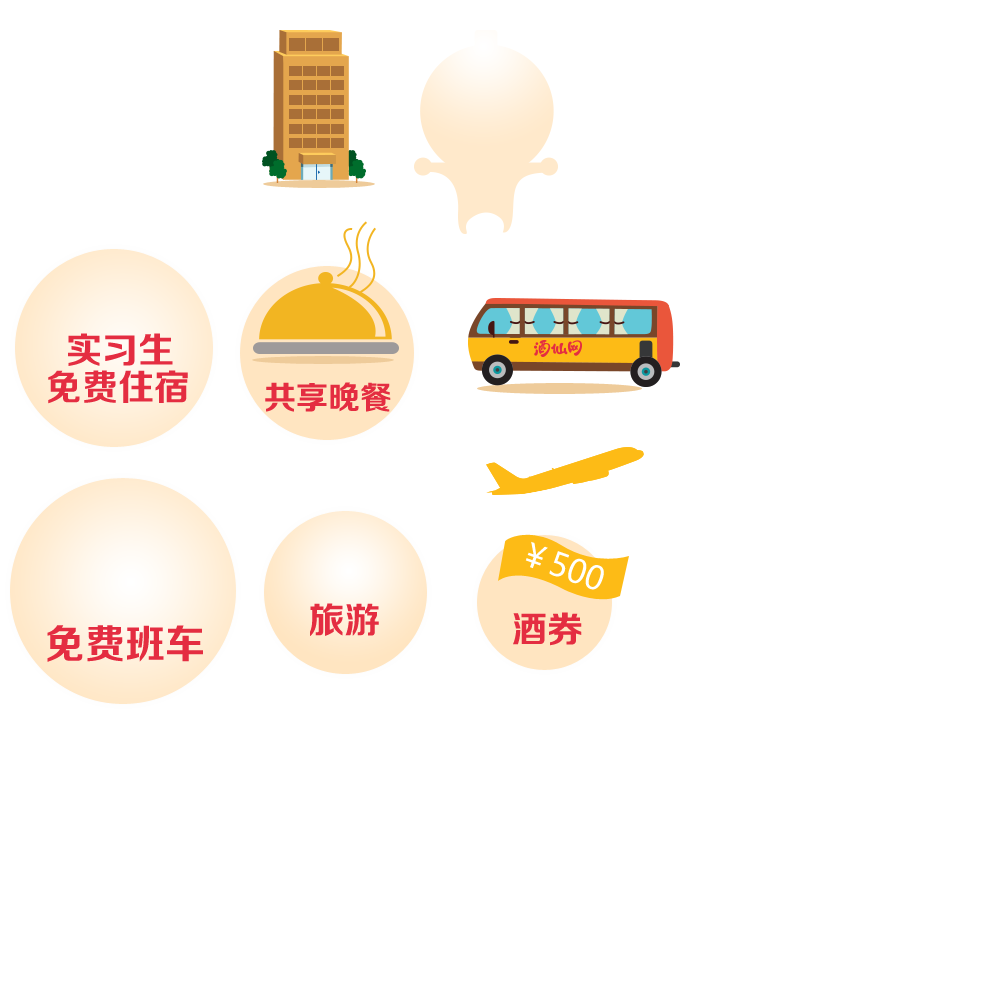
<style>
.page{position:relative;width:1000px;height:1000px;background:#ffffff}
.page>*{position:absolute;margin:0}
.t1{font:36px "FZZCHJW--GB1-0";color:#e42d41;text-transform:uppercase}
.t2{font:32px "FZZCHJW--GB1-0";color:#e42d41;text-transform:uppercase}
.t3{font:32px "MicrosoftYaHei";color:#ffffff;text-transform:uppercase}
.t4{font:40px "FZZCHJW--GB1-0";color:#e42d41;text-transform:uppercase}
</style>
<div class="page">
<p class="t1" style="left:68px;top:333px;width:105px;height:33px">实习生</p>
<p class="t1" style="left:48px;top:370px;width:140px;height:34px">免费住宿</p>
<p class="t2" style="left:265px;top:382px;width:126px;height:30px">共享晚餐</p>
<p class="t3" style="left:525px;top:541px;width:79px;height:49px;rotate:20deg">￥500</p>
<p class="t1" style="left:310px;top:603px;width:69px;height:33px">旅游</p>
<p class="t1" style="left:513px;top:612px;width:69px;height:34px">酒券</p>
<p class="t4" style="left:47px;top:625px;width:156px;height:37px">免费班车</p>
</div>
